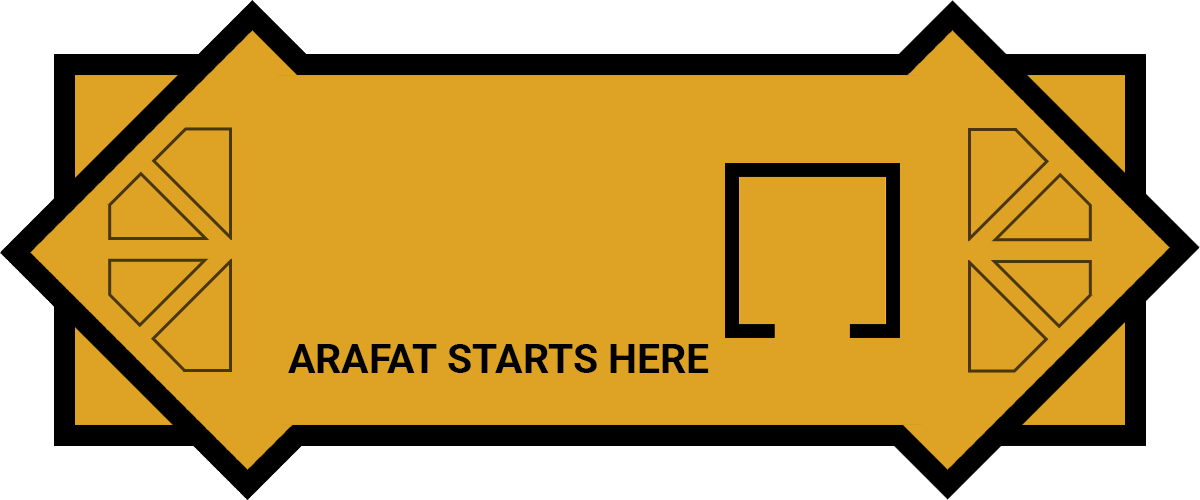
<style>
.page{position:relative;width:1200px;height:500px;background:#dea325}
.page>*{position:absolute;margin:0}
.t1{font:40.8px "Roboto-Bold";color:#000000}
</style>
<div class="page">
<p class="t1" style="left:288px;top:344px;width:421px;height:29px">ARAFAT STARTS HERE</p>
</div>
